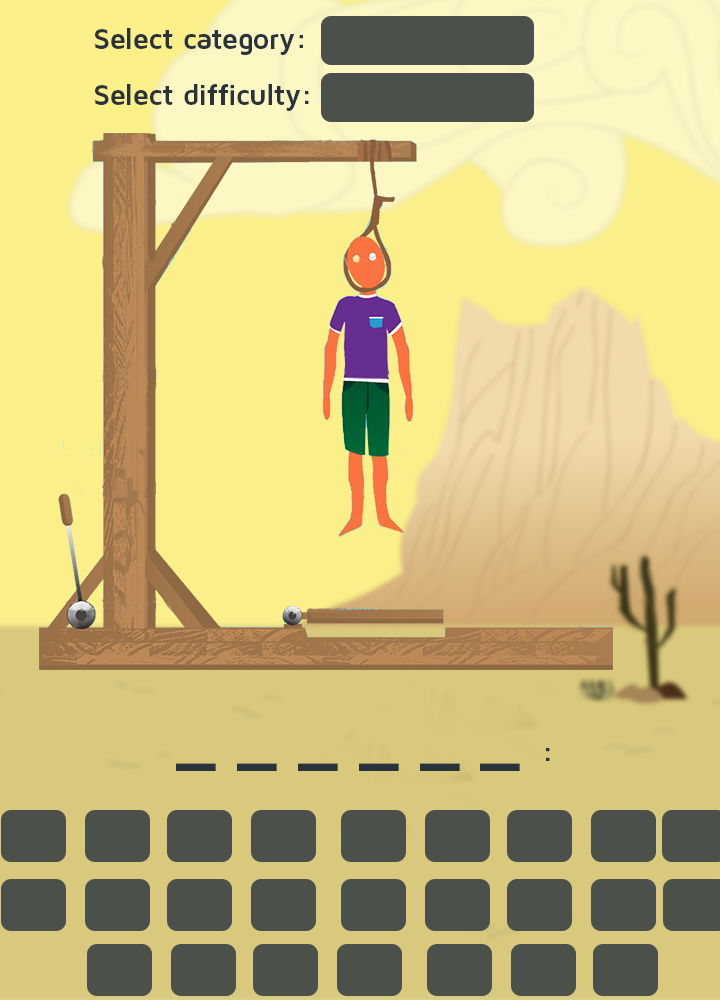
<style>
.page{position:relative;width:720px;height:1000px;background:#faef88}
.page>*{position:absolute;margin:0}
.t1{font:30px "MavenProBold";letter-spacing:-0.025em;color:#2a333b}
.t2{font:73px "MavenProBlack";letter-spacing:-0.025em;color:#2a333b}
</style>
<div class="page">
<p class="t1" style="left:95px;top:28px;width:208px;height:27px">Select category:</p>
<p class="t1" style="left:95px;top:84px;width:214px;height:27px">Select difficulty:</p>
<p class="t2" style="left:176px;top:748px;width:374px;height:23px">_ _ _ _ _ _ <span class="t1">:</span></p>
</div>
